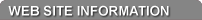
<style>
.page{position:relative;width:202px;height:20px;background:#858585}
.page>*{position:absolute;margin:0}
.t1{font:13.3px "Arial-BoldMT";color:#ffffff}
</style>
<div class="page">
<p class="t1" style="left:8px;top:5px;width:161px;height:11px">WEB SITE INFORMATION</p>
</div>
